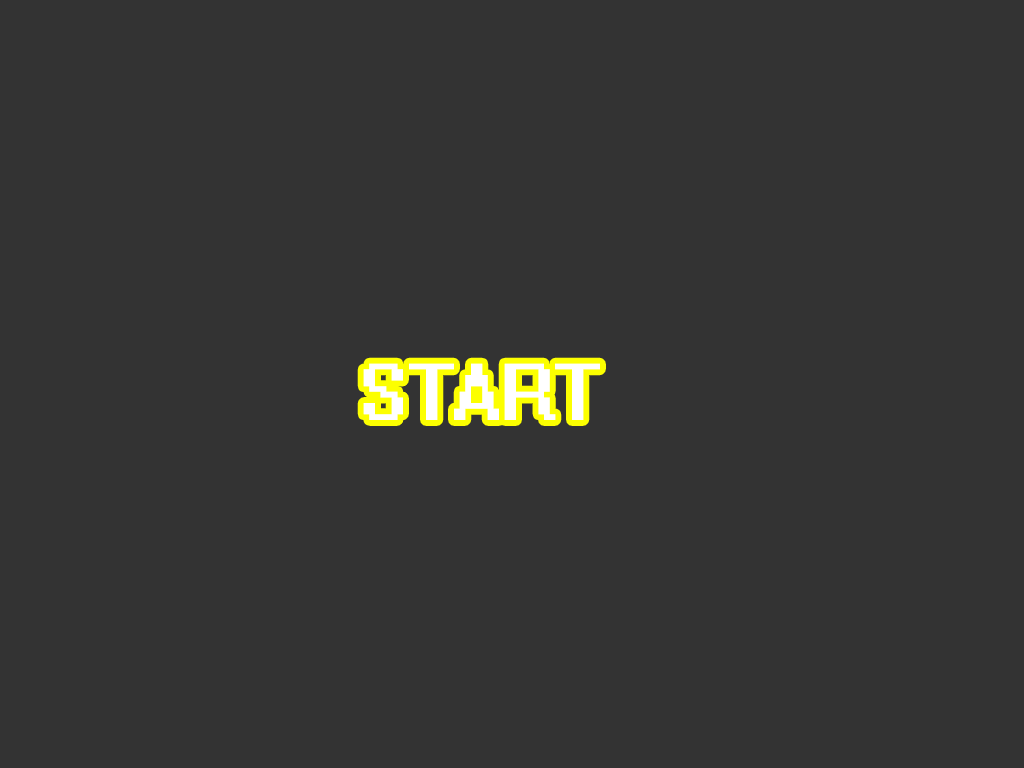
<style>
.page{position:relative;width:1024px;height:768px;background:#333333}
.page>*{position:absolute;margin:0}
.t1{font:72px "System";color:#ffffff}
</style>
<div class="page">
<p class="t1" style="left:363px;top:363px;width:237px;height:57px">START</p>
</div>
